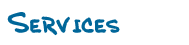
<style>
.page{position:relative;width:189px;height:45px;background:#ffffff}
.page>*{position:absolute;margin:0}
.t1{font:18px "BobbiesHand";color:#006699}
.t2{font:30px "BobbiesHand";color:#006699}
</style>
<div class="page">
<p class="t1" style="left:8px;top:13px;width:111px;height:22px"><span class="t2">S</span>ERVICES</p>
</div>
